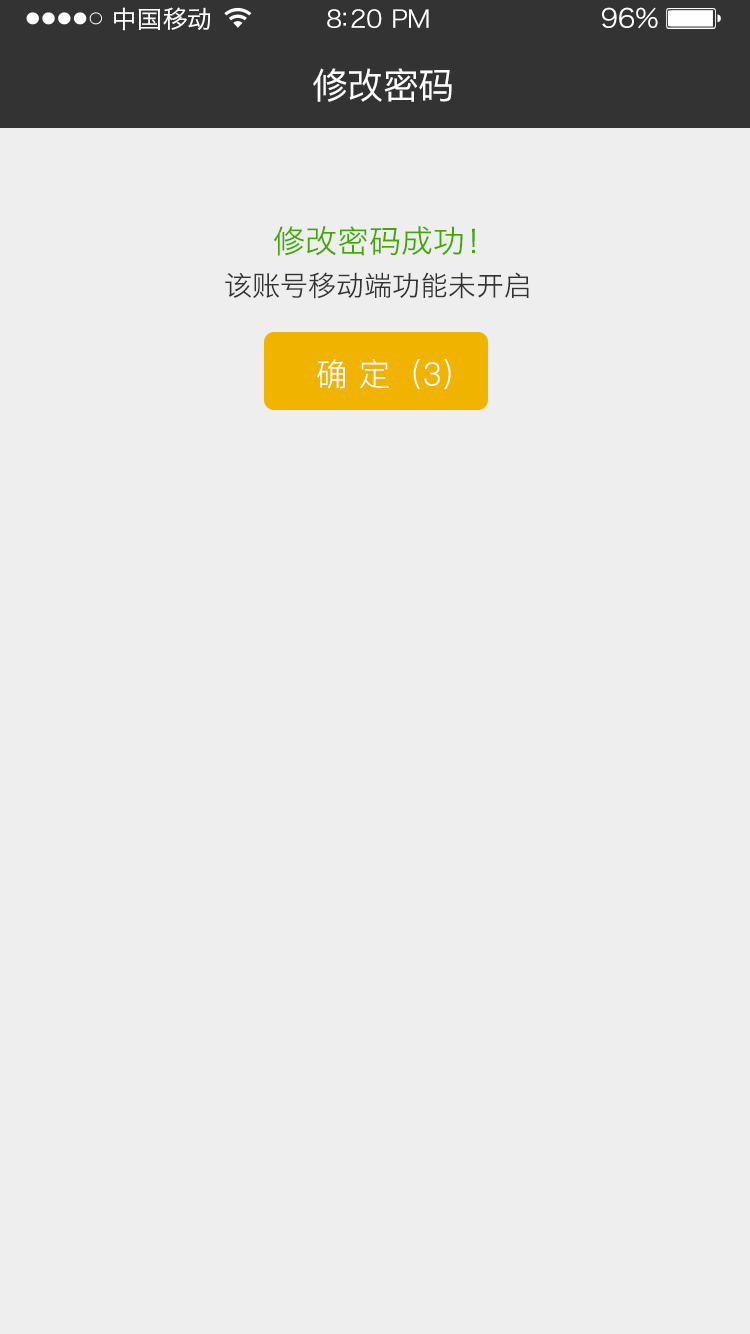
<style>
.page{position:relative;width:750px;height:1334px;background:#eeeeee}
.page>*{position:absolute;margin:0}
.t1{font:24px "HiraginoSansGB-W3";letter-spacing:0.02em;color:#ffffff;scale:1.03 1}
.t2{font:24px "HiraginoSansGB-W3";letter-spacing:-0.02em;color:#ffffff;scale:1.03 1}
.t3{font:26.2px "HiraginoSansGB-W3";letter-spacing:-0.02em;color:#ffffff;scale:1.03 1}
.t4{font:36px "PingFang-SC-Medium";letter-spacing:-0.02em;color:#ffffff}
.t5{font:32px "HiraginoSansGB-W3";color:#40a900}
.t6{font:28px "HiraginoSansGB-W3";color:#333333}
.t7{font:32px "PingFang-SC-Regular";color:#ffffff}
</style>
<div class="page">
<p class="t1" style="left:114px;top:7px;width:97px;height:24px">中国移动</p>
<p class="t2" style="left:327px;top:9px;width:102px;height:19px">8:20 PM</p>
<p class="t3" style="left:602px;top:7px;width:56px;height:22px">96%</p>
<p class="t4" style="left:313px;top:68px;width:139px;height:34px">修改密码</p>
<p class="t5" style="left:273px;top:226px;width:202px;height:30px">修改密码成功！</p>
<p class="t6" style="left:225px;top:272px;width:304px;height:27px">该账号移动端功能未开启</p>
<p class="t7" style="left:317px;top:359px;width:134px;height:30px">确 定（3）</p>
</div>
